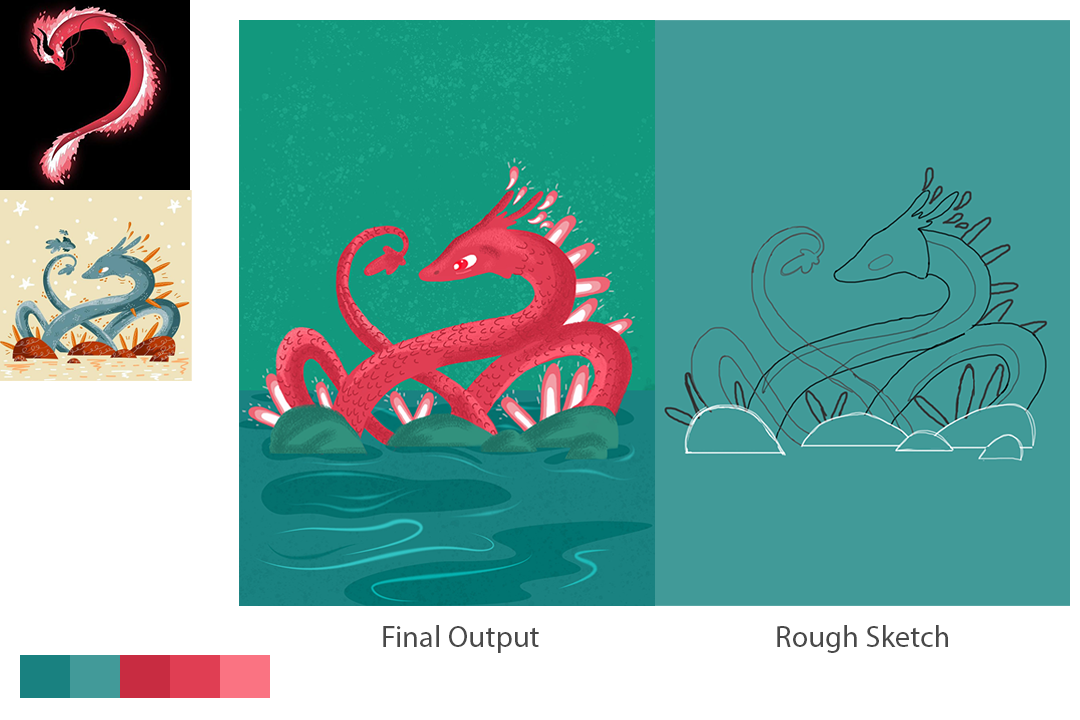
<style>
.page{position:relative;width:1080px;height:720px;background:#ffffff}
.page>*{position:absolute;margin:0}
.t1{font:30.5px "MyriadPro-Regular";color:#494949}
</style>
<div class="page">
<p class="t1" style="left:383px;top:625px;width:156px;height:28px">Final Output</p>
<p class="t1" style="left:777px;top:625px;width:171px;height:28px">Rough Sketch</p>
</div>
